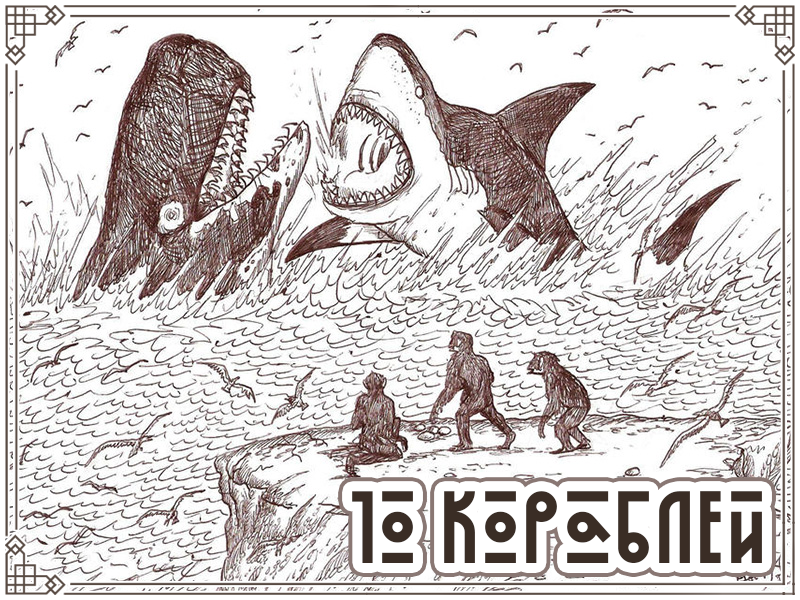
<style>
.page{position:relative;width:800px;height:600px;background:#ffffff}
.page>*{position:absolute;margin:0}
.t1{font:105px "kurbanistika-Regular";color:#3a2d25}
</style>
<div class="page">
<p class="t1" style="left:352px;top:491px;width:410px;height:72px">1o кораблей</p>
<p class="t1" style="left:352px;top:491px;width:410px;height:72px">1o кораблей</p>
</div>
